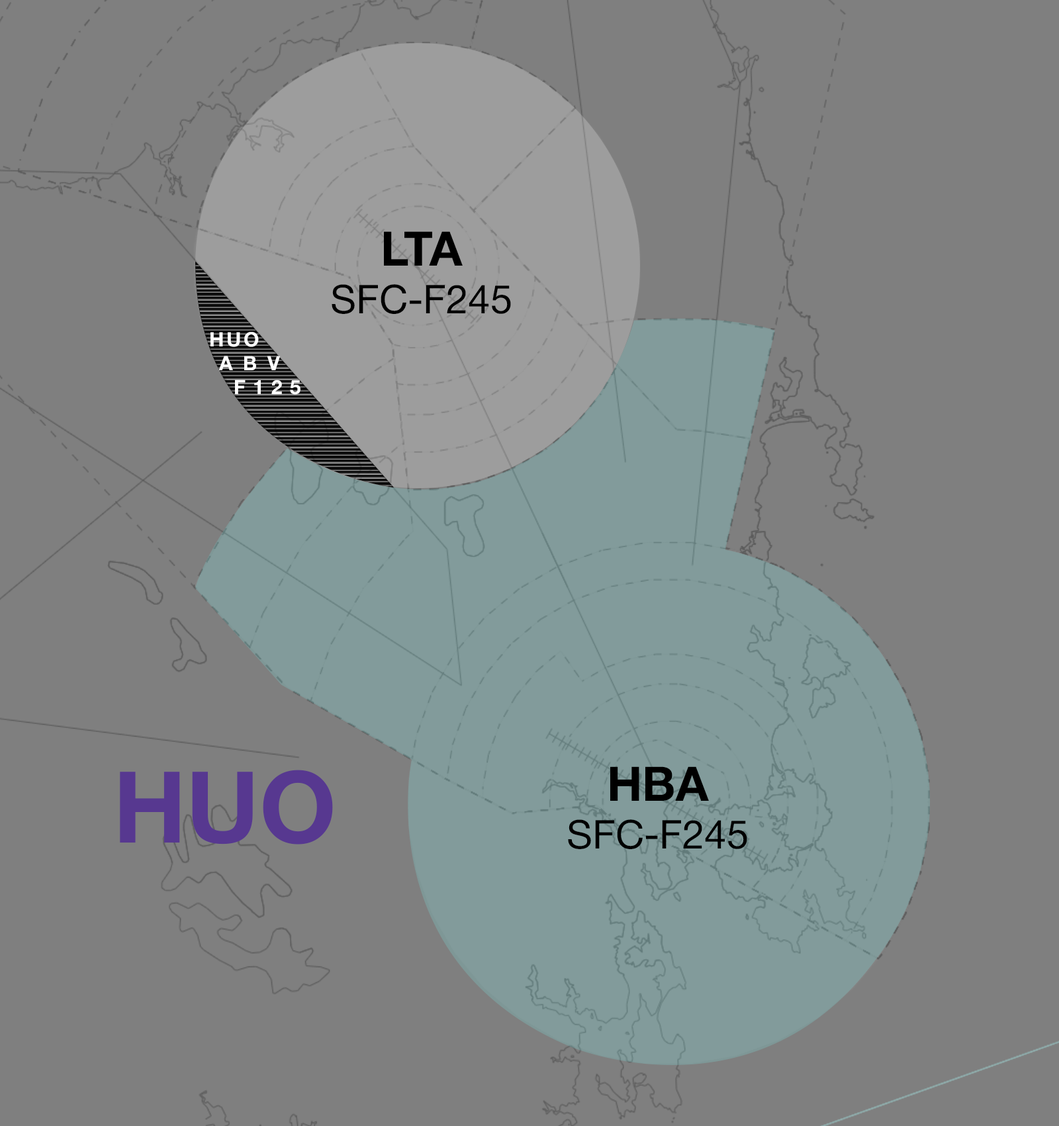
<style>
.page{position:relative;width:1059px;height:1126px;background:#7f7f7f}
.page>*{position:absolute;margin:0}
.t1{font:39.7px "HelveticaNeue-Roman";color:#000000}
.t2{font:47.7px "HelveticaNeue-Bold";color:#000000}
.t3{font:19.9px "HelveticaNeue-Bold";color:#ffffff}
.t4{font:99.3px "HelveticaNeue-Bold";color:#573890}
</style>
<div class="page">
<p class="t1" style="left:332px;top:231px;width:179px;height:83px;text-align:center"><span class="t2">LTA<br></span>SFC-F245</p>
<p class="t3" style="left:211px;top:332px;width:90px;height:63px;text-align:justify">HUO ABV F125</p>
<p class="t4" style="left:120px;top:769px;width:213px;height:75px">HUO</p>
<p class="t1" style="left:568px;top:766px;width:180px;height:83px;text-align:center"><span class="t2">HBA<br></span>SFC-F245</p>
</div>
